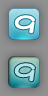
<style>
.page{position:relative;width:48px;height:96px}
.page>*{position:absolute;margin:0}
.t1{font:24px "DFMaruMoji-W9-WING-RKSJ-H";color:#ffffff;font-weight:bold}
.t2{font:24px "DFMaruMoji-W9-WING-RKSJ-H";color:#b5e3e9;font-weight:bold}
</style>
<div class="page">
<p class="t1" style="left:14px;top:15px;width:21px;height:19px">9</p>
<p class="t2" style="left:14px;top:63px;width:21px;height:19px">9</p>
</div>
